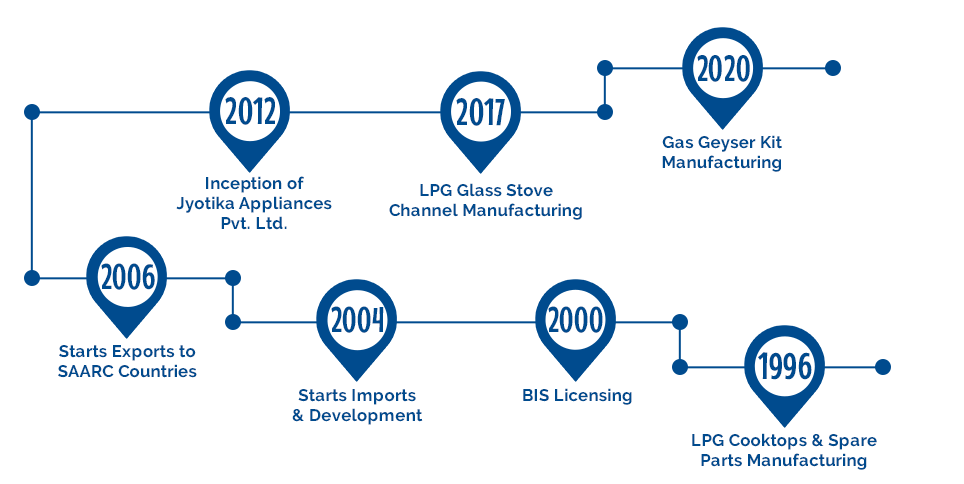
<style>
.page{position:relative;width:964px;height:484px;background:#ffffff}
.page>*{position:absolute;margin:0}
.t1{font:36.2px "MouseMemoirs-Regular";letter-spacing:0.025em;color:#004b8e}
.t2{font:37.5px "MouseMemoirs-Regular";letter-spacing:0.025em;color:#004b8e}
.t3{font:16.7px "Raleway-Bold";letter-spacing:0.025em;color:#004b8e}
.t4{font:35.4px "MouseMemoirs-Regular";letter-spacing:0.025em;color:#004b8e}
</style>
<div class="page">
<p class="t1" style="left:697px;top:55px;width:53px;height:27px">2020</p>
<p class="t2" style="left:225px;top:97px;width:50px;height:28px">2012</p>
<p class="t2" style="left:456px;top:98px;width:49px;height:28px">2017</p>
<p class="t3" style="left:662px;top:135px;width:120px;height:37px;text-align:center">Gas Geyser Kit<br>Manufacturing</p>
<p class="t3" style="left:176px;top:176px;width:156px;height:54px;text-align:center">Inception of<br>Jyotika Appliances<br>Pvt. Ltd.</p>
<p class="t3" style="left:389px;top:183px;width:193px;height:37px;text-align:center">LPG Glass Stove<br>Channel Manufacturing</p>
<p class="t4" style="left:101px;top:263px;width:54px;height:27px">2006</p>
<p class="t4" style="left:331px;top:306px;width:53px;height:27px">2004</p>
<p class="t4" style="left:548px;top:306px;width:55px;height:27px">2000</p>
<p class="t3" style="left:58px;top:345px;width:139px;height:33px;text-align:center">Starts Exports to<br>SAARC Countries</p>
<p class="t2" style="left:758px;top:352px;width:54px;height:28px">1996</p>
<p class="t3" style="left:292px;top:389px;width:131px;height:36px;text-align:center">Starts Imports<br>&amp; Development</p>
<p class="t3" style="left:523px;top:388px;width:109px;height:17px">BIS Licensing</p>
<p class="t3" style="left:692px;top:433px;width:185px;height:37px;text-align:center">LPG Cooktops &amp; Spare<br>Parts Manufacturing</p>
</div>
